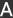
<style>
.page{position:relative;width:13px;height:18px;background:#333333}
.page>*{position:absolute;margin:0}
.t1{font:20px "MicrosoftNewTaiLue";color:#ffffff}
</style>
<div class="page">
<p class="t1" style="left:0px;top:2px;width:13px;height:15px">A</p>
</div>
